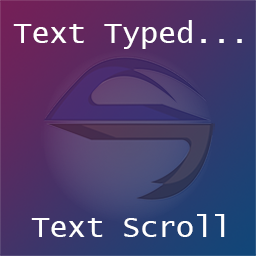
<style>
.page{position:relative;width:256px;height:256px}
.page>*{position:absolute;margin:0}
.t1{font:30px "LucidaConsole";color:#ffffff}
</style>
<div class="page">
<p class="t1" style="left:13px;top:20px;width:229px;height:29px">Text Typed...</p>
<p class="t1" style="left:31px;top:214px;width:194px;height:23px">Text Scroll</p>
</div>
